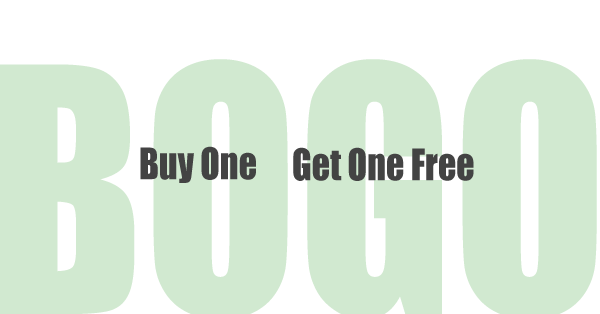
<style>
.page{position:relative;width:600px;height:314px;background:#d1e9d0}
.page>*{position:absolute;margin:0}
.t1{font:40.3px "Impact";color:#434343;scale:0.89 1}
</style>
<div class="page">
<p class="t1" style="left:140px;top:146px;width:116px;height:37px">Buy One</p>
<p class="t1" style="left:293px;top:147px;width:181px;height:34px">Get One Free</p>
</div>
